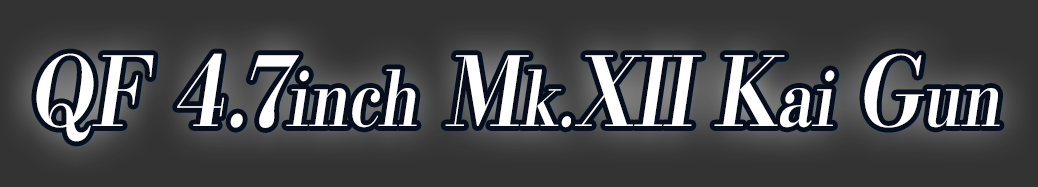
<style>
.page{position:relative;width:1038px;height:187px;background:#333333}
.page>*{position:absolute;margin:0}
.t1{font:96px "KochoStd-Heavy";color:#ffffff;font-style:italic;scale:0.83 1}
.t2{font:76.8px "KochoStd-Heavy";color:#ffffff;font-style:italic;scale:0.83 1}
</style>
<div class="page">
<p class="t1" style="left:36px;top:53px;width:964px;height:89px">QF 4.7<span class="t2">inch</span> M<span class="t2">k.</span>XII K<span class="t2">ai </span>G<span class="t2">un</span></p>
</div>
